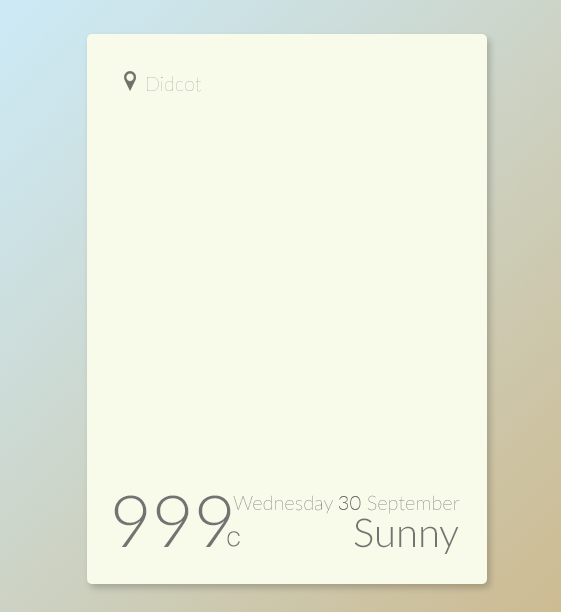
<style>
.page{position:relative;width:561px;height:612px;background:#f8fbe9}
.page>*{position:absolute;margin:0}
.t1{font:20px "Lato-Hairline"}
.t2{font:72px "Lato-Light";color:#737373}
.t3{font:20px "Lato-Thin"}
.t4{font:20px "Lato-Thin";color:#737373}
.t5{font:40px "Lato-Light";color:#737373}
.t6{font:20px "Helvetica-Light";color:#737373}
</style>
<div class="page">
<p class="t1" style="left:147px;top:76px;width:54px;height:16px">Didcot</p>
<p class="t2" style="left:114px;top:495px;width:117px;height:52px">999</p>
<p class="t3" style="left:233px;top:495px;width:100px;height:19px">Wednesday</p>
<p class="t4" style="left:338px;top:496px;width:23px;height:14px">30</p>
<p class="t3" style="left:367px;top:495px;width:93px;height:19px">September</p>
<p class="t5" style="left:354px;top:518px;width:105px;height:36px">Sunny</p>
<p class="t6" style="left:227px;top:531px;width:13px;height:16px">C</p>
</div>
